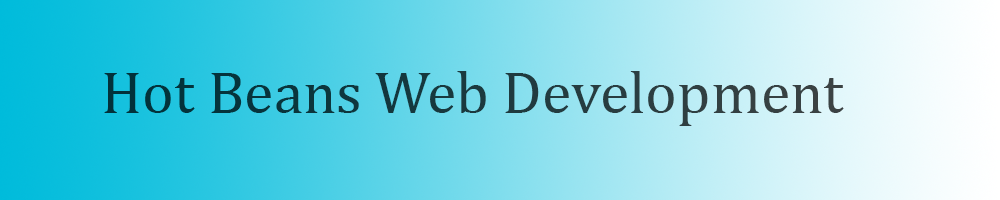
<style>
.page{position:relative;width:1000px;height:200px}
.page>*{position:absolute;margin:0}
.t1{font:60px "Cambria"}
</style>
<div class="page">
<p class="t1" style="left:104px;top:71px;width:740px;height:55px">Hot Beans Web Development</p>
</div>
